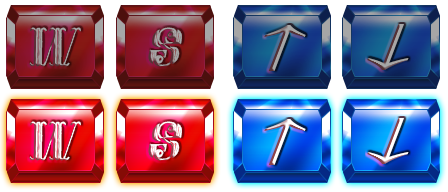
<style>
.page{position:relative;width:448px;height:192px}
.page>*{position:absolute;margin:0}
.t1{font:53px "Jewel-Bold-Grunge";font-style:italic}
.t2{font:53px "TimesNewRomanPSMT";font-style:italic;scale:2.16 1}
</style>
<div class="page">
<p class="t1" style="left:29px;top:121px;width:52px;height:40px">W</p>
<p class="t1" style="left:148px;top:121px;width:34px;height:40px">S</p>
<p class="t2" style="left:264px;top:119px;width:42px;height:46px">↑</p>
<p class="t2" style="left:367px;top:118px;width:42px;height:46px">↓</p>
</div>
